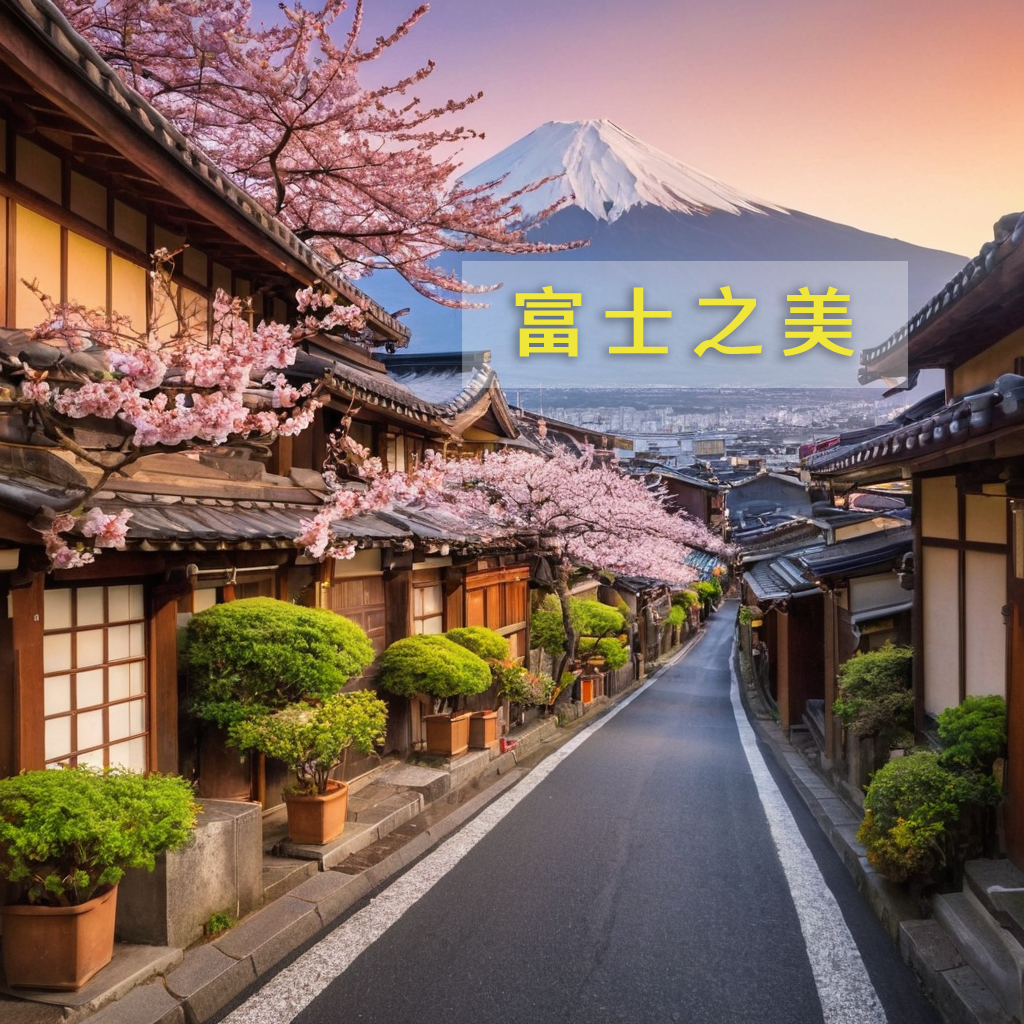
<style>
.page{position:relative;width:1024px;height:1024px}
.page>*{position:absolute;margin:0}
.t1{font:75px "ARFangXinShuH7B5Std-HV";letter-spacing:0.2em;color:#f0e539}
</style>
<div class="page">
<p class="t1" style="left:515px;top:285px;width:339px;height:72px">富士之美</p>
</div>
